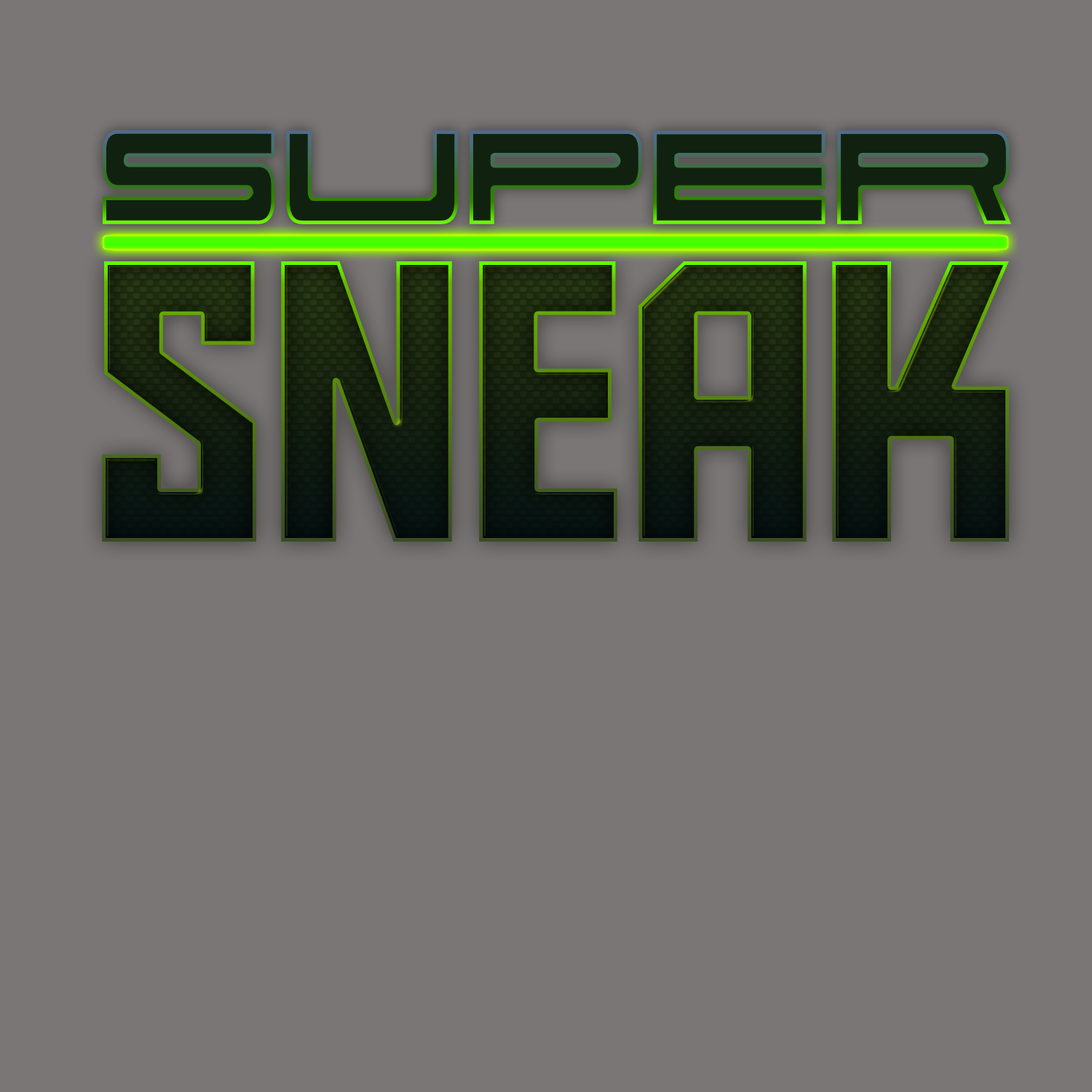
<style>
.page{position:relative;width:1092px;height:1092px;background:#7a7676}
.page>*{position:absolute;margin:0}
.t1{font:193.3px "911PorschaBold";color:#11210f}
.t2{font:396.9px "AldotheApache";color:#182d00}
</style>
<div class="page">
<p class="t1" style="left:103px;top:130px;width:908px;height:94px">Super</p>
<p class="t2" style="left:102px;top:261px;width:907px;height:281px">SNEAK</p>
</div>
